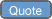
<style>
.page{position:relative;width:52px;height:19px;background:#6699cc}
.page>*{position:absolute;margin:0}
.t1{font:12px "HelveticaNeue";color:#ffffff}
</style>
<div class="page">
<p class="t1" style="left:9px;top:6px;width:33px;height:10px">Quote</p>
</div>
